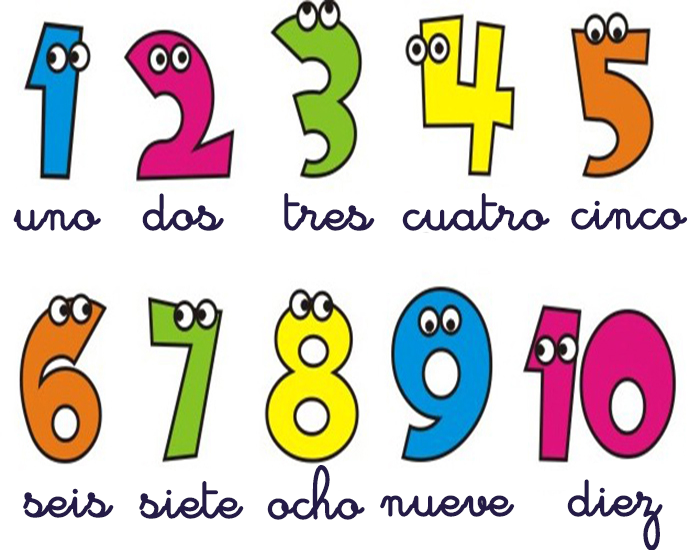
<style>
.page{position:relative;width:700px;height:550px;background:#ffffff}
.page>*{position:absolute;margin:0}
.t1{font:58px "Cursivestandard";color:#241b47;font-weight:bold}
</style>
<div class="page">
<p class="t1" style="left:142px;top:193px;width:82px;height:38px">dos</p>
<p class="t1" style="left:284px;top:193px;width:91px;height:38px">tres</p>
<p class="t1" style="left:402px;top:193px;width:148px;height:38px">cuatro</p>
<p class="t1" style="left:13px;top:209px;width:88px;height:22px">uno</p>
<p class="t1" style="left:571px;top:200px;width:117px;height:30px">cinco</p>
<p class="t1" style="left:267px;top:465px;width:98px;height:55px">ocho</p>
<p class="t1" style="left:139px;top:481px;width:105px;height:38px">siete</p>
<p class="t1" style="left:567px;top:479px;width:96px;height:72px">diez</p>
<p class="t1" style="left:23px;top:488px;width:91px;height:30px">seis</p>
<p class="t1" style="left:380px;top:495px;width:135px;height:22px">nueve</p>
</div>
